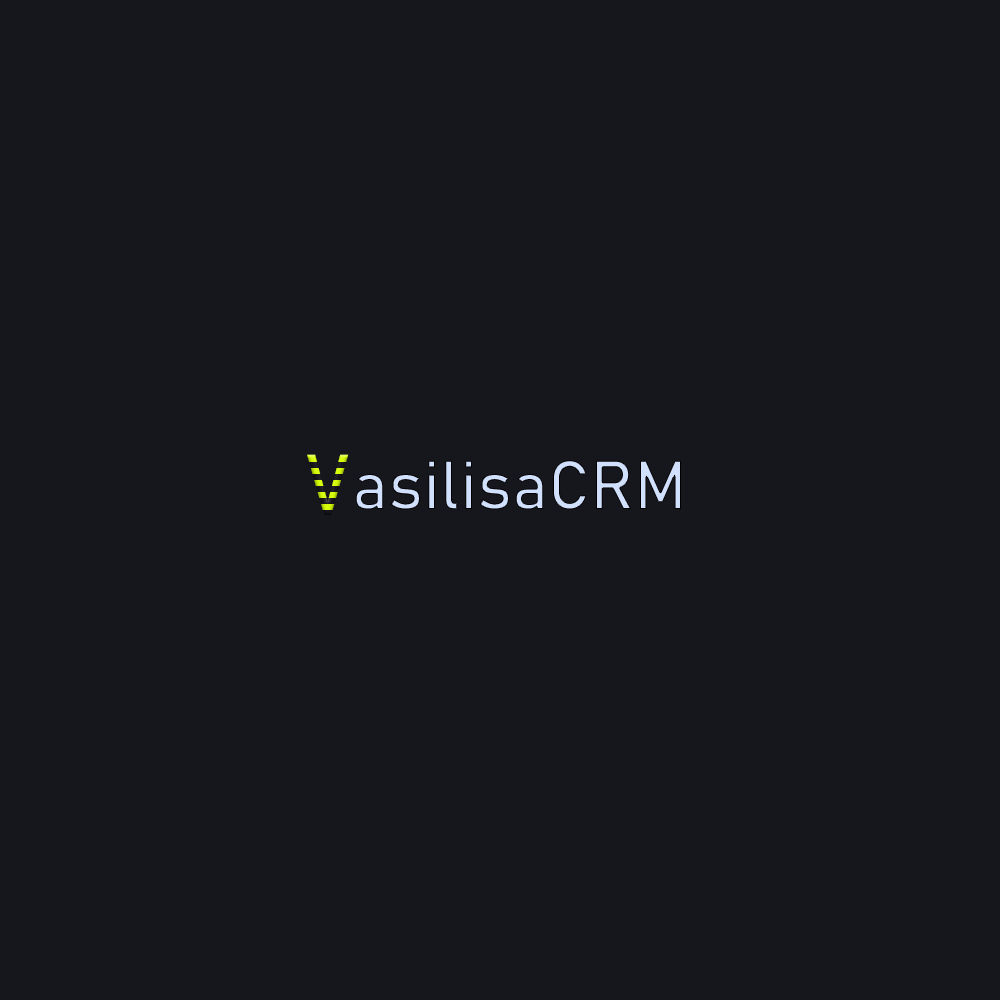
<style>
.page{position:relative;width:1000px;height:1000px;background:#16161d}
.page>*{position:absolute;margin:0}
.t1{font:85px "Bahnschrift";scale:0.87 1}
.t2{font:68px "Bahnschrift";color:#d1e0fd}
</style>
<div class="page">
<p class="t1" style="left:307px;top:454px;width:42px;height:61px">V</p>
<p class="t2" style="left:355px;top:460px;width:326px;height:50px">asilisaCRM</p>
</div>
